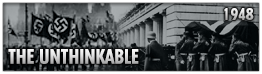
<style>
.page{position:relative;width:262px;height:74px}
.page>*{position:absolute;margin:0}
.t1{font:16px "TempoStd-HeavyCondensed"}
.t2{font:20px "TempoStd-HeavyCondensed"}
</style>
<div class="page">
<p class="t1" style="left:224px;top:8px;width:30px;height:12px">1948</p>
<p class="t2" style="left:8px;top:49px;width:131px;height:15px">THE UNTHINKABLE</p>
</div>
